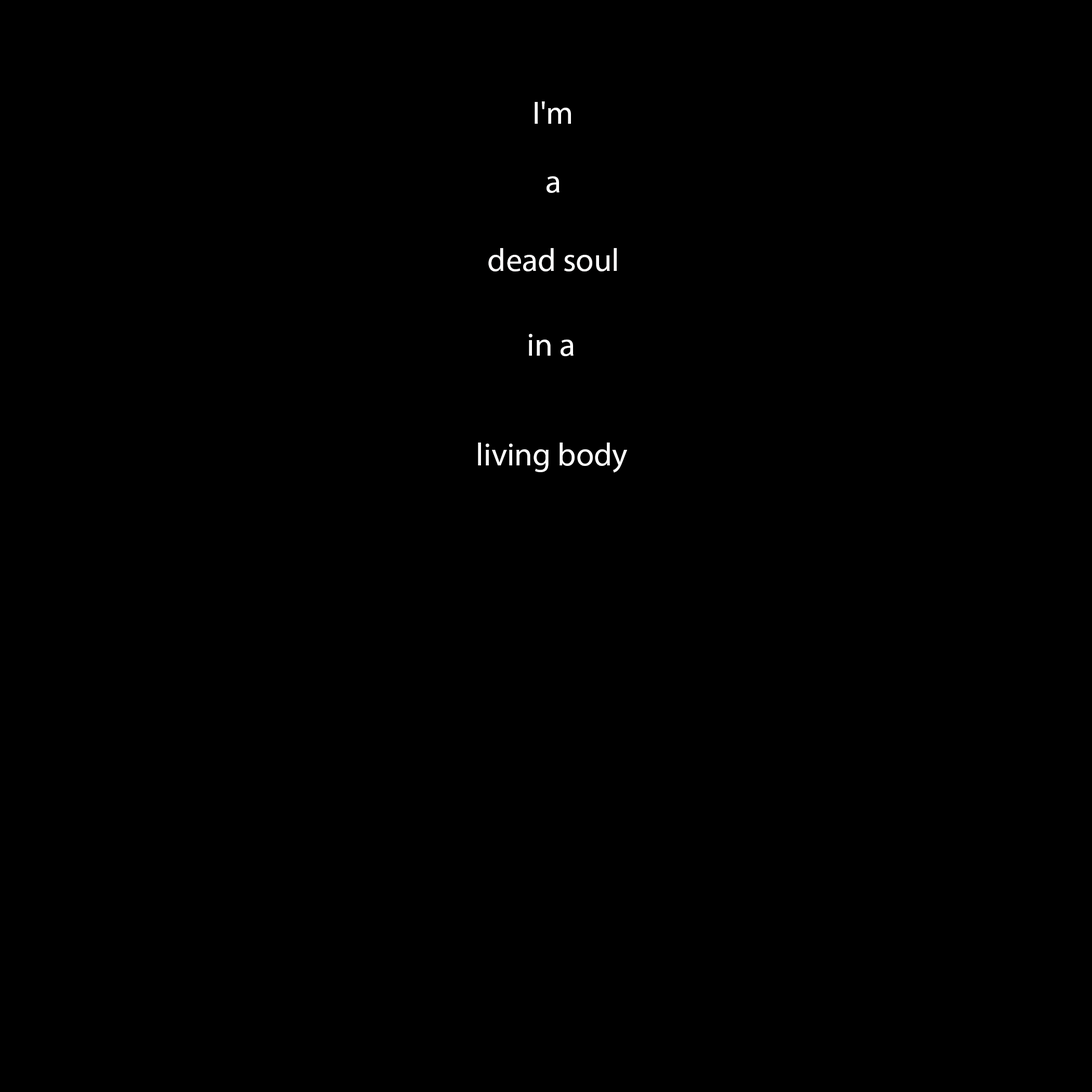
<style>
.page{position:relative;width:1092px;height:1092px;background:#000000}
.page>*{position:absolute;margin:0}
.t1{font:32.5px "MyriadPro-Regular";color:#ffffff}
.t2{font:32.5px "MyriadPro-Regular";color:#fffefe}
</style>
<div class="page">
<p class="t1" style="left:535px;top:101px;width:36px;height:23px">I'm</p>
<p class="t1" style="left:547px;top:176px;width:13px;height:17px">a</p>
<p class="t2" style="left:488px;top:248px;width:129px;height:23px">dead soul</p>
<p class="t1" style="left:529px;top:334px;width:45px;height:22px">in a</p>
<p class="t1" style="left:478px;top:443px;width:149px;height:30px">living body</p>
</div>
